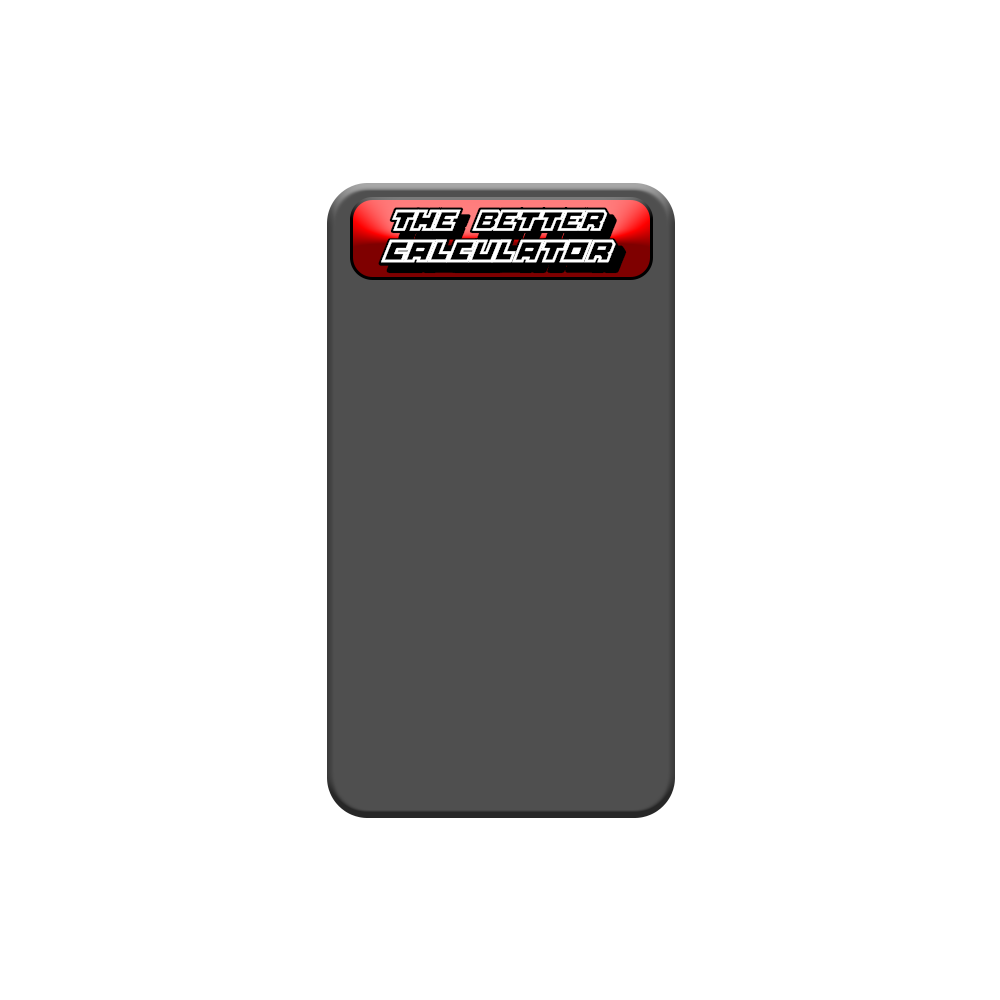
<style>
.page{position:relative;width:1000px;height:1000px;background:#ffffff}
.page>*{position:absolute;margin:0}
.t1{font:25px "PlatinumSignUnder"}
.t2{font:25px "PlatinumSignOver";color:#ffffff}
.t3{font:27.1px "PlatinumSignOver";color:#ffffff}
</style>
<div class="page">
<p class="t1" style="left:389px;top:207px;width:228px;height:33px">THE  BETTER</p>
<p class="t2" style="left:392px;top:209px;width:216px;height:22px">THE  BETTER</p>
<p class="t3" style="left:381px;top:239px;width:235px;height:24px">CALCULATOR</p>
</div>
